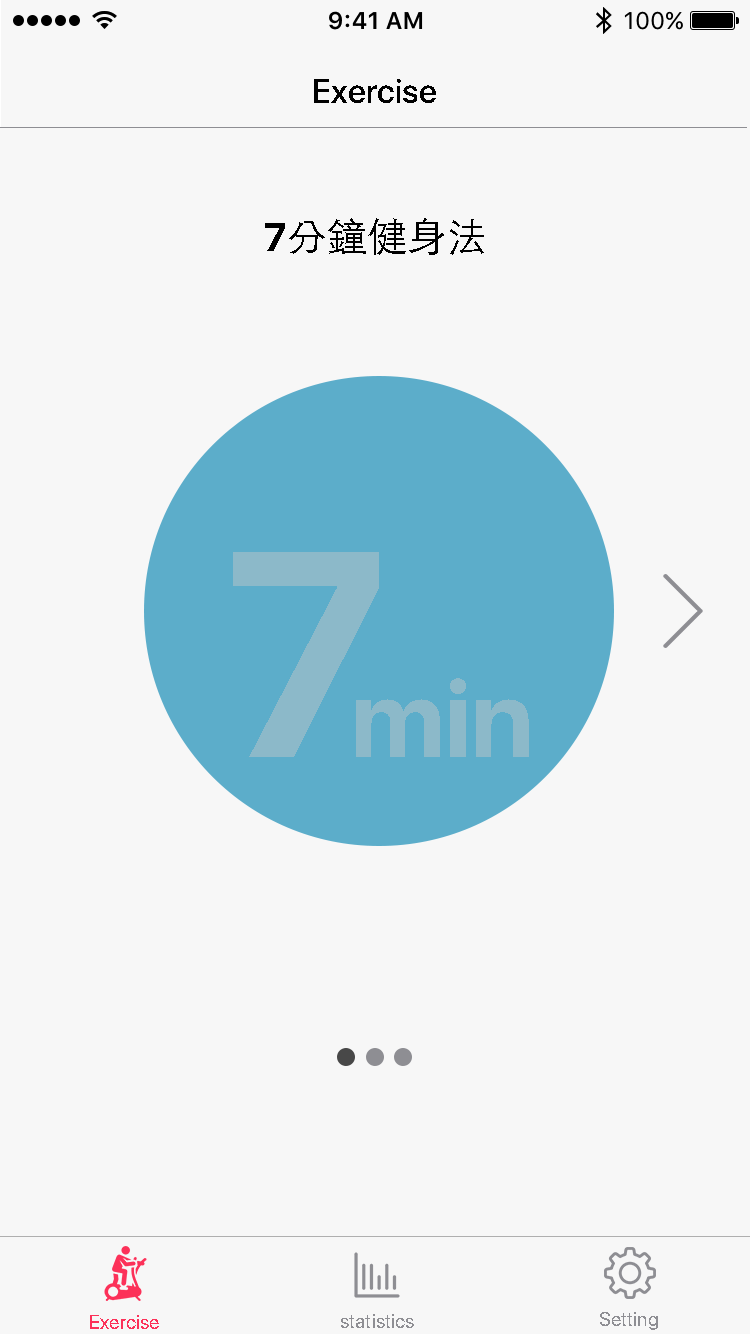
<style>
.page{position:relative;width:750px;height:1334px;background:#f7f7f7}
.page>*{position:absolute;margin:0}
.t1{font:34px "SFUIDisplay-Medium";color:#000000}
.t2{font:40px "STHeitiTC-Light";color:#000000}
.t3{font:40px "SFUIDisplay-Bold";color:#000000}
.t4{font:290.6px "SFUIDisplay-Bold";color:#8cb9c9}
.t5{font:108.3px "SFUIDisplay-Bold";color:#8cb9c9}
.t6{font:20px "SFUIDisplay-Regular";color:#8e8e93}
.t7{font:20px "SFUIDisplay-Regular";color:#fc3159}
</style>
<div class="page">
<p class="t1" style="left:314px;top:79px;width:122px;height:24px">Exercise</p>
<p class="t2" style="left:265px;top:218px;width:219px;height:37px"><span class="t3">7</span>分鐘健身法</p>
<p class="t4" style="left:233px;top:552px;width:146px;height:205px">7</p>
<p class="t5" style="left:356px;top:678px;width:173px;height:79px">min</p>
<p class="t6" style="left:600px;top:1312px;width:58px;height:18px">Setting</p>
<p class="t7" style="left:90px;top:1315px;width:69px;height:14px">Exercise</p>
<p class="t6" style="left:341px;top:1314px;width:73px;height:14px">statistics</p>
</div>
